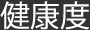
<style>
.page{position:relative;width:90px;height:30px;background:#333333}
.page>*{position:absolute;margin:0}
.t1{font:30px "KozGoPr6N-Regular";color:#ffffff}
</style>
<div class="page">
<p class="t1" style="left:0px;top:1px;width:89px;height:29px">健康度</p>
</div>
